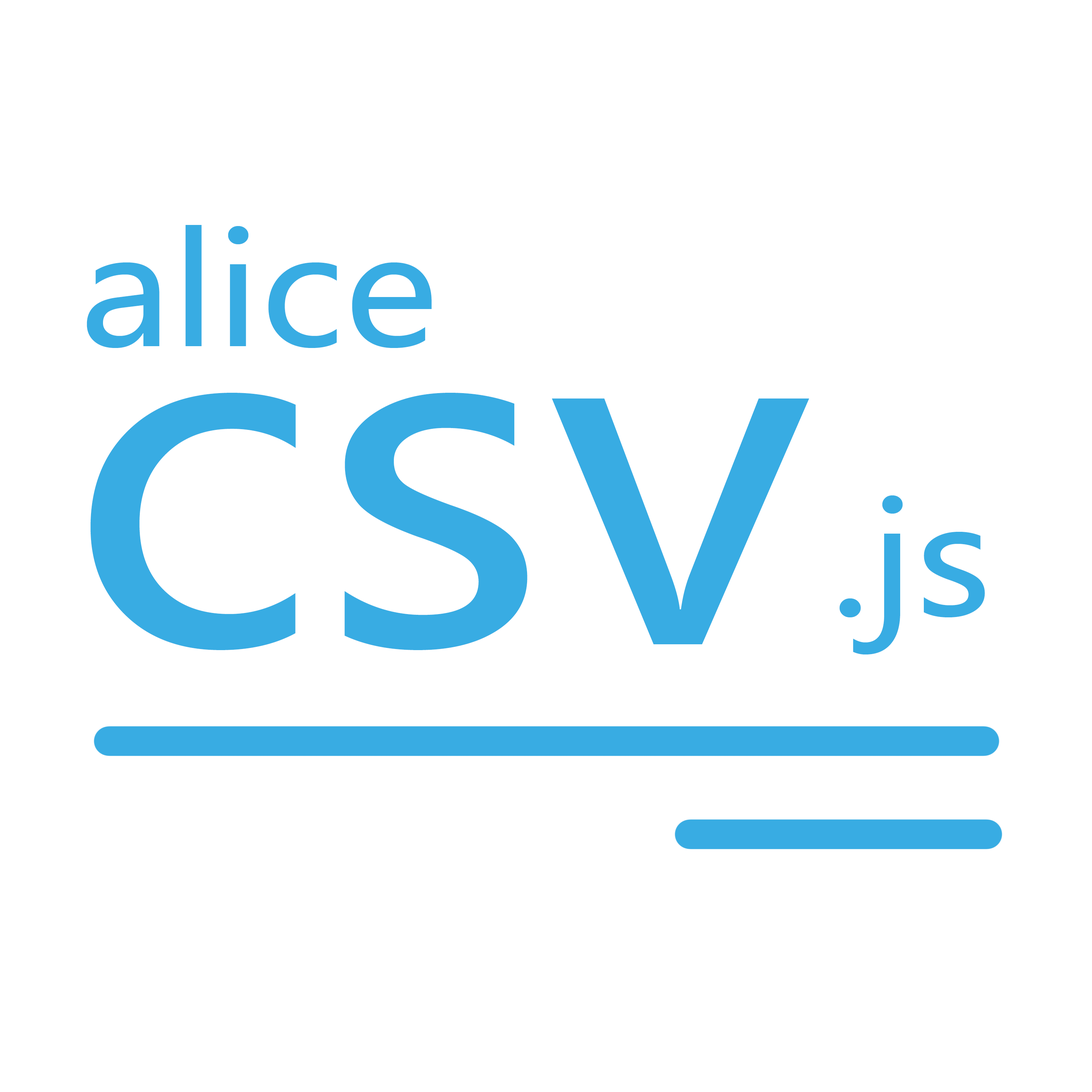
<style>
.page{position:relative;width:1092px;height:1092px;background:#ffffff}
.page>*{position:absolute;margin:0}
.t1{font:151.7px "MicrosoftYaHeiUI";color:#38ace3;scale:1.1 1}
.t2{font:455px "MicrosoftYaHeiUI";color:#38ace3;scale:1.1 1}
</style>
<div class="page">
<p class="t1" style="left:87px;top:225px;width:345px;height:123px">alice</p>
<p class="t2" style="left:90px;top:393px;width:719px;height:257px">csv</p>
<p class="t1" style="left:839px;top:495px;width:146px;height:159px">.js</p>
</div>
